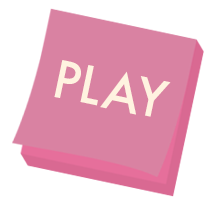
<style>
.page{position:relative;width:216px;height:204px;background:#ffffff}
.page>*{position:absolute;margin:0}
.t1{font:50px "Futura-Medium";color:#fff3e0}
</style>
<div class="page">
<p class="t1" style="left:54px;top:60px;width:117px;height:57px;rotate:12deg">PLAY</p>
</div>
